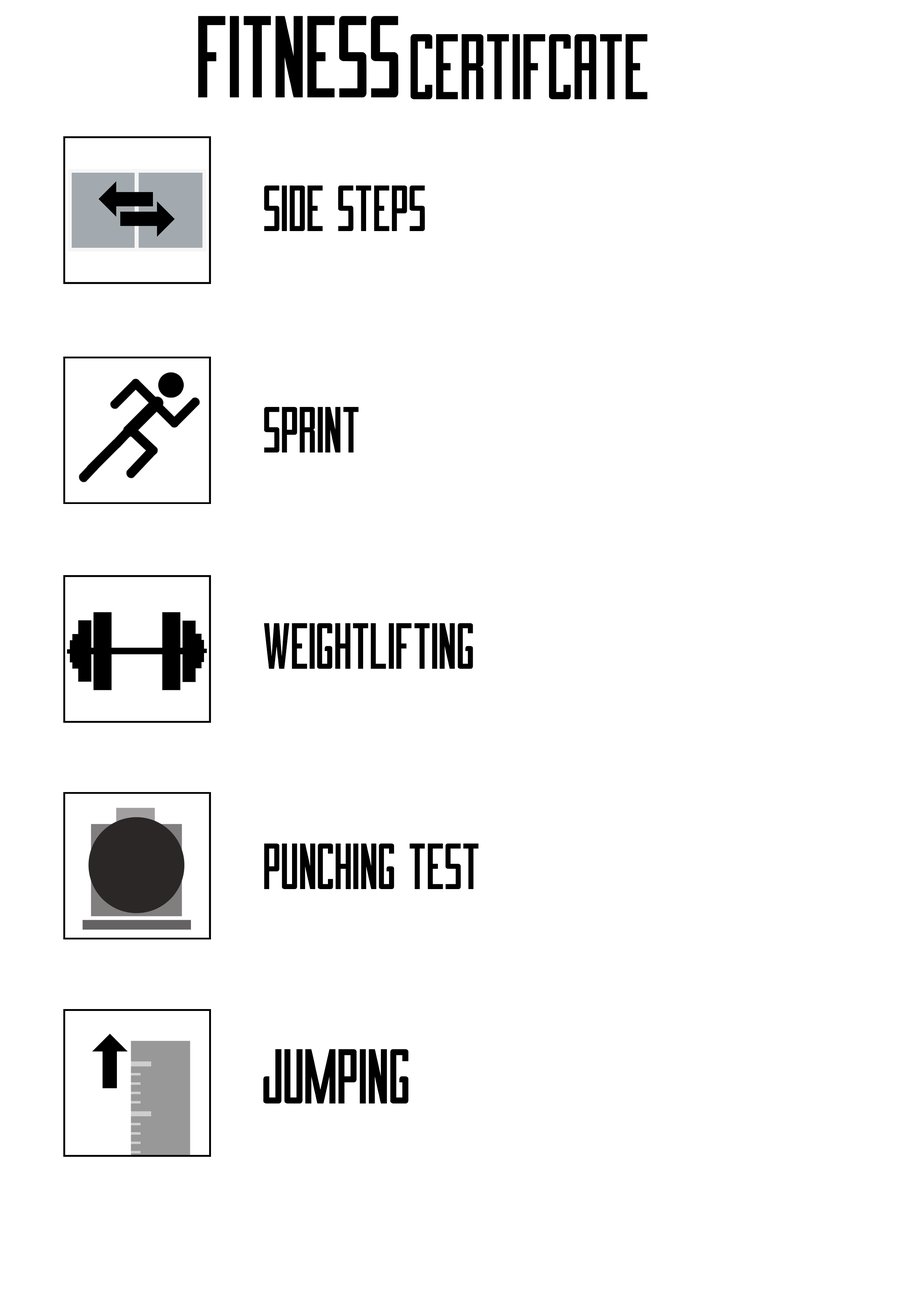
<style>
.page{position:relative;width:918px;height:1299px;background:#ffffff}
.page>*{position:absolute;margin:0}
.t1{font:51.9px "ImnovaSt";color:#000000}
.t2{font:61.7px "ImnovaSt";color:#000000}
</style>
<div class="page">
<p class="t1" style="left:264px;top:185px;width:161px;height:46px">Side steps</p>
<p class="t1" style="left:264px;top:407px;width:95px;height:45px">Sprint</p>
<p class="t1" style="left:264px;top:623px;width:209px;height:46px">Weightlifting</p>
<p class="t1" style="left:264px;top:843px;width:215px;height:46px">Punching Test</p>
<p class="t2" style="left:263px;top:1049px;width:146px;height:54px">Jumping</p>
</div>
